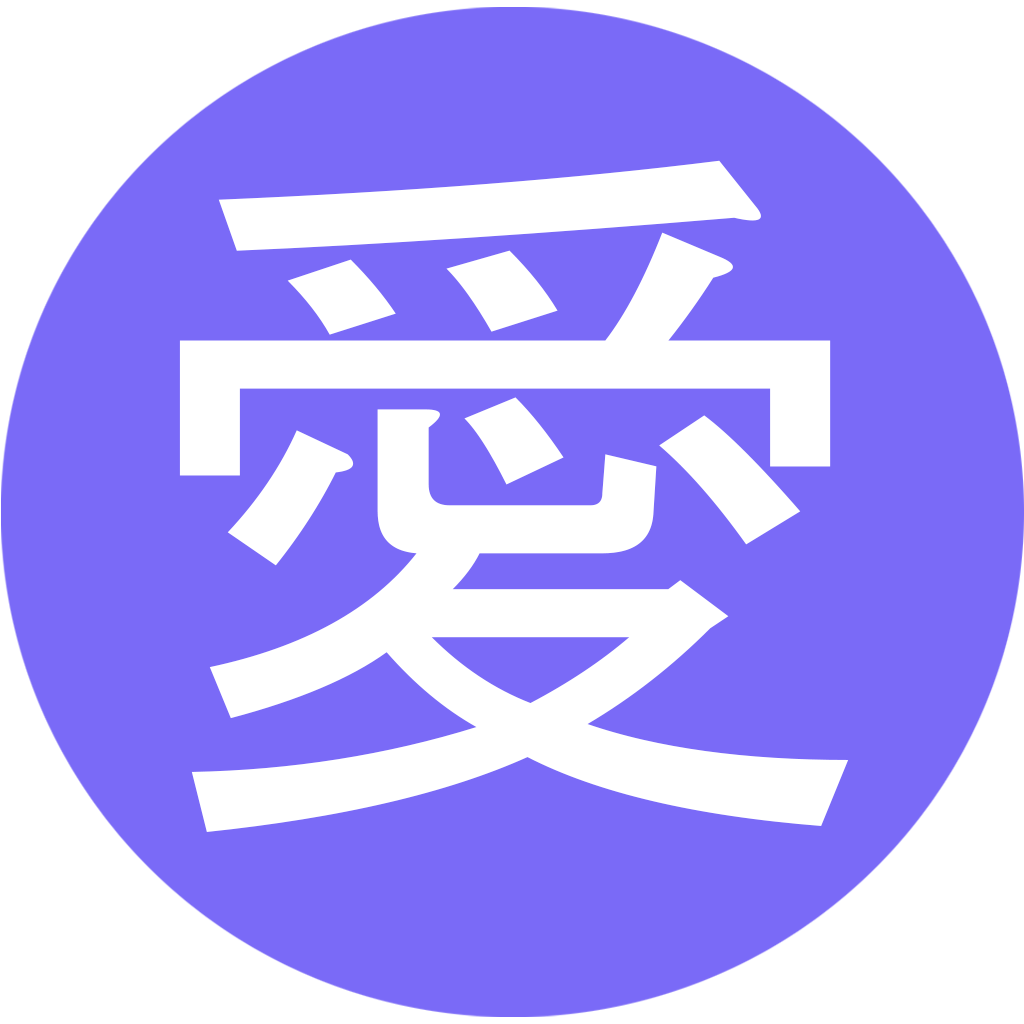
<style>
.page{position:relative;width:1024px;height:1024px;background:#7a6af7}
.page>*{position:absolute;margin:0}
.t1{font:767.3px "MS-Gothic";color:#ffffff}
</style>
<div class="page">
<p class="t1" style="left:179px;top:160px;width:670px;height:672px">愛</p>
</div>
